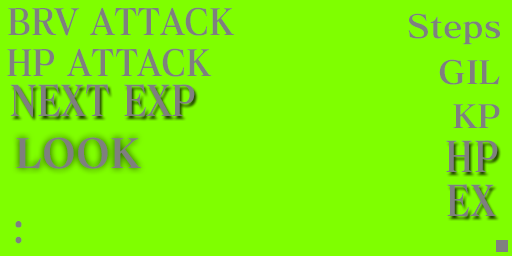
<style>
.page{position:relative;width:512px;height:256px;background:#7fff00}
.page>*{position:absolute;margin:0}
.t1{font:36px "MatisseElegantoPro-BEdit";color:#7f7f7f;scale:0.91 1}
.t2{font:31.9px "MatisseElegantoPro-BEdit";color:#7f7f7f;scale:1.05 1}
.t3{font:42px "MatisseElegantoPro-BEdit";color:#7f7f7f;scale:0.82 1}
.t4{font:40px "MatisseElegantoPro-BEdit";color:#7f7f7f}
.t5{font:42.9px "MatisseElegantoPro-BEdit";color:#7f7f7f;scale:0.93 1}
</style>
<div class="page">
<p class="t1" style="left:8px;top:7px;width:227px;height:29px">BRV ATTACK</p>
<p class="t2" style="left:408px;top:13px;width:92px;height:32px">Steps</p>
<p class="t1" style="left:7px;top:48px;width:205px;height:29px">HP ATTACK</p>
<p class="t2" style="left:439px;top:59px;width:61px;height:26px">GIL</p>
<p class="t3" style="left:10px;top:84px;width:185px;height:33px">NEXT EXP</p>
<p class="t2" style="left:453px;top:104px;width:47px;height:24px">KP</p>
<p class="t4" style="left:16px;top:137px;width:126px;height:32px">LOOK</p>
<p class="t3" style="left:446px;top:140px;width:52px;height:32px">HP</p>
<p class="t3" style="left:447px;top:184px;width:49px;height:33px">EX</p>
<p class="t5" style="left:15px;top:221px;width:7px;height:23px">:</p>
</div>
